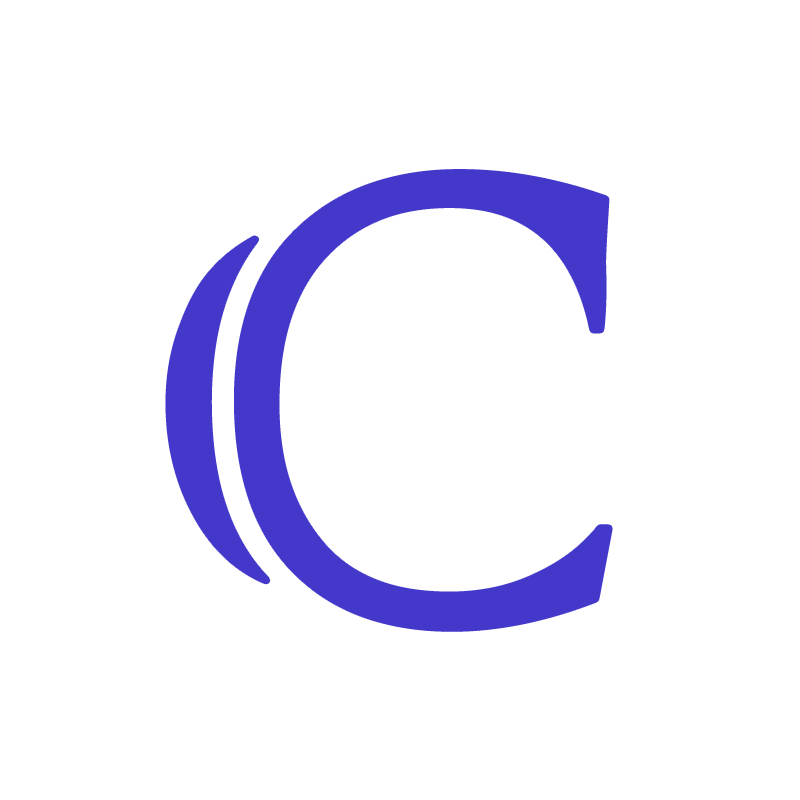
<style>
.page{position:relative;width:800px;height:800px;background:#ffffff}
.page>*{position:absolute;margin:0}
.t1{font:850px "ColonnaMT";color:#4338ca}
</style>
<div class="page">
<p class="t1" style="left:169px;top:173px;width:440px;height:455px">C</p>
</div>
